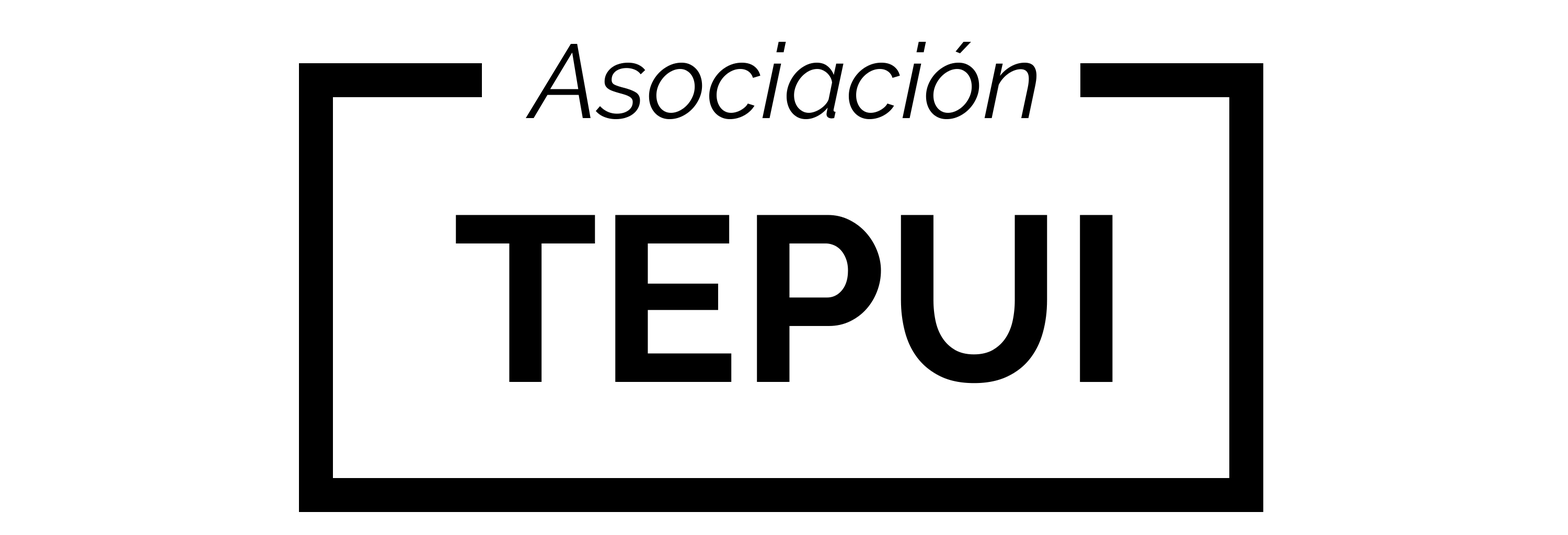
<style>
.page{position:relative;width:1568px;height:535px;background:#ffffff}
.page>*{position:absolute;margin:0}
.t1{font:104.5px "Raleway-Italic";color:#000000}
.t2{font:235.2px "Raleway-Bold";color:#000000}
</style>
<div class="page">
<p class="t1" style="left:526px;top:42px;width:510px;height:77px">Asociación</p>
<p class="t2" style="left:456px;top:215px;width:657px;height:169px">TEPUI</p>
</div>
